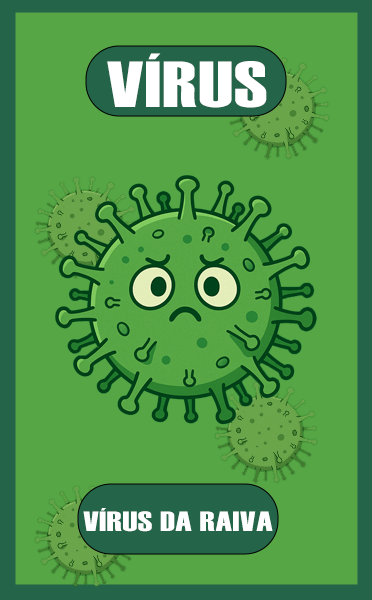
<style>
.page{position:relative;width:372px;height:600px;background:#56a645}
.page>*{position:absolute;margin:0}
.t1{font:65px "Haettenschweiler";letter-spacing:0.015em;color:#ffffff;scale:1.35 1}
.t2{font:28px "Haettenschweiler";letter-spacing:0.015em;color:#ffffff;scale:1.35 1}
</style>
<div class="page">
<p class="t1" style="left:107px;top:53px;width:160px;height:55px">VÍRUS</p>
<p class="t2" style="left:83px;top:508px;width:190px;height:24px">VÍRUS DA RAIVA</p>
</div>
